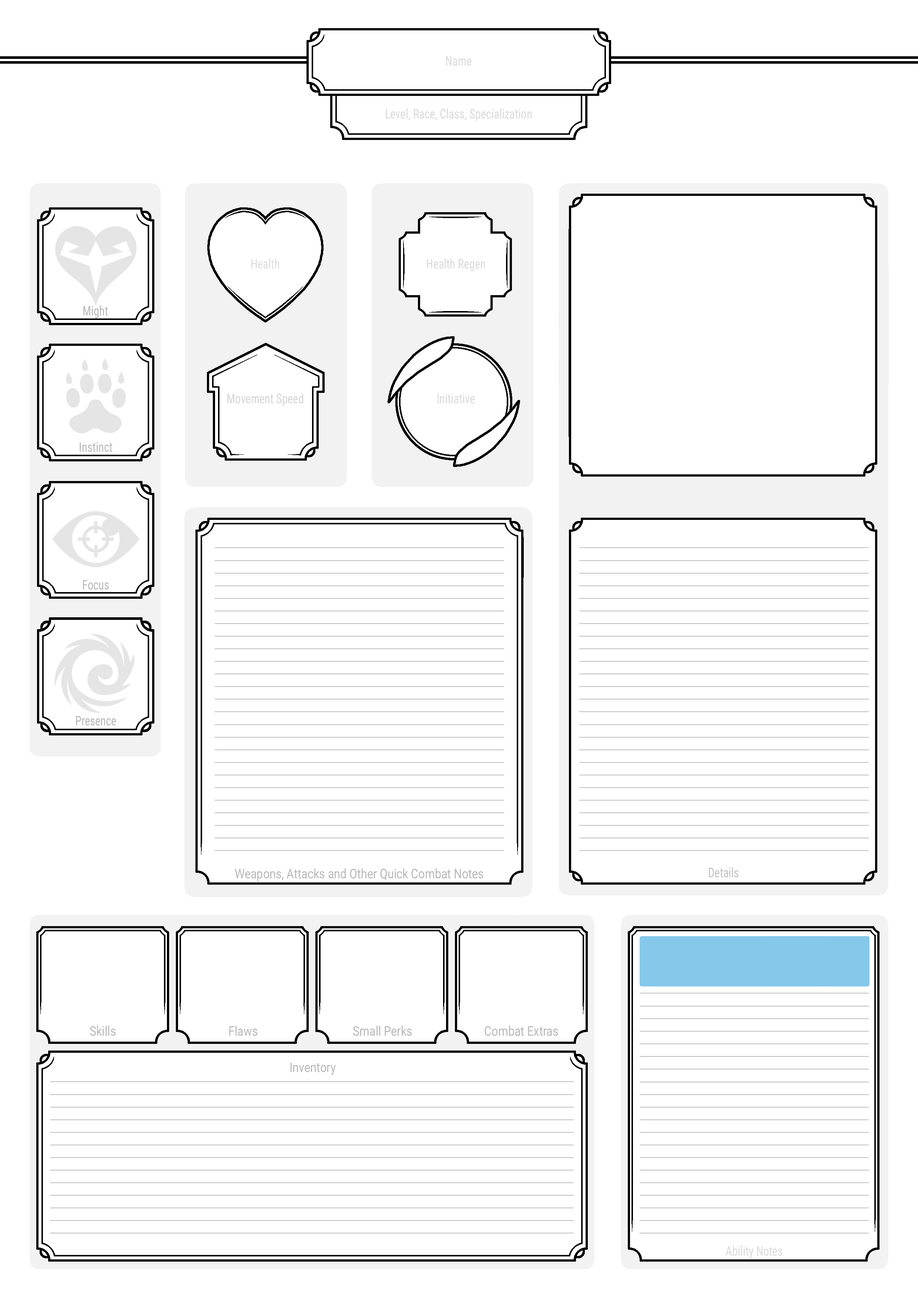
<style>
.page{position:relative;width:918px;height:1299px;background:#ffffff}
.page>*{position:absolute;margin:0}
.t1{font:13.3px "RobotoCondensed-Regular";color:#d9d9d9;scale:0.85 1}
.t2{font:13.3px "RobotoCondensed-Regular";color:#dcdcdc;scale:0.85 1}
.t3{font:13.3px "RobotoCondensed-Regular";color:#b8b8b8;scale:0.85 1}
.t4{font:13.3px "RobotoCondensed-Regular";color:#d5d5d5;scale:0.85 1}
.t5{font:13.3px "Roboto-Regular";color:#b8b8b8;scale:0.85 1}
.t6{font:13.3px "RobotoCondensed-Regular";color:#c0c0c0;scale:0.85 1}
</style>
<div class="page">
<p class="t1" style="left:446px;top:56px;width:26px;height:10px">Name</p>
<p class="t1" style="left:386px;top:108px;width:146px;height:13px">Level, Race, Class, Specialization</p>
<p class="t2" style="left:251px;top:258px;width:28px;height:11px">Health</p>
<p class="t1" style="left:427px;top:258px;width:58px;height:13px">Health Regen</p>
<p class="t3" style="left:83px;top:305px;width:25px;height:13px">Might</p>
<p class="t4" style="left:227px;top:393px;width:77px;height:13px">Movement Speed</p>
<p class="t1" style="left:438px;top:394px;width:37px;height:10px">Initiative</p>
<p class="t3" style="left:80px;top:442px;width:32px;height:10px">Instinct</p>
<p class="t3" style="left:83px;top:580px;width:26px;height:10px">Focus</p>
<p class="t3" style="left:76px;top:716px;width:40px;height:10px">Presence</p>
<p class="t5" style="left:235px;top:868px;width:249px;height:13px">Weapons, Attacks and Other Quick Combat Notes</p>
<p class="t6" style="left:709px;top:867px;width:30px;height:10px">Details</p>
<p class="t5" style="left:90px;top:1026px;width:26px;height:10px">Skills</p>
<p class="t5" style="left:229px;top:1026px;width:29px;height:10px">Flaws</p>
<p class="t5" style="left:353px;top:1026px;width:59px;height:10px">Small Perks</p>
<p class="t5" style="left:485px;top:1026px;width:73px;height:10px">Combat Extras</p>
<p class="t5" style="left:290px;top:1062px;width:46px;height:13px">Inventory</p>
<p class="t1" style="left:726px;top:1245px;width:57px;height:13px">Ability Notes</p>
</div>
